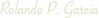
<style>
.page{position:relative;width:99px;height:18px;background:#ffffff}
.page>*{position:absolute;margin:0}
.t1{font:20px "SavoyeLetPlain";color:#e2dfc3}
</style>
<div class="page">
<p class="t1" style="left:0px;top:0px;width:99px;height:18px">Rolando P. Garcia</p>
</div>
